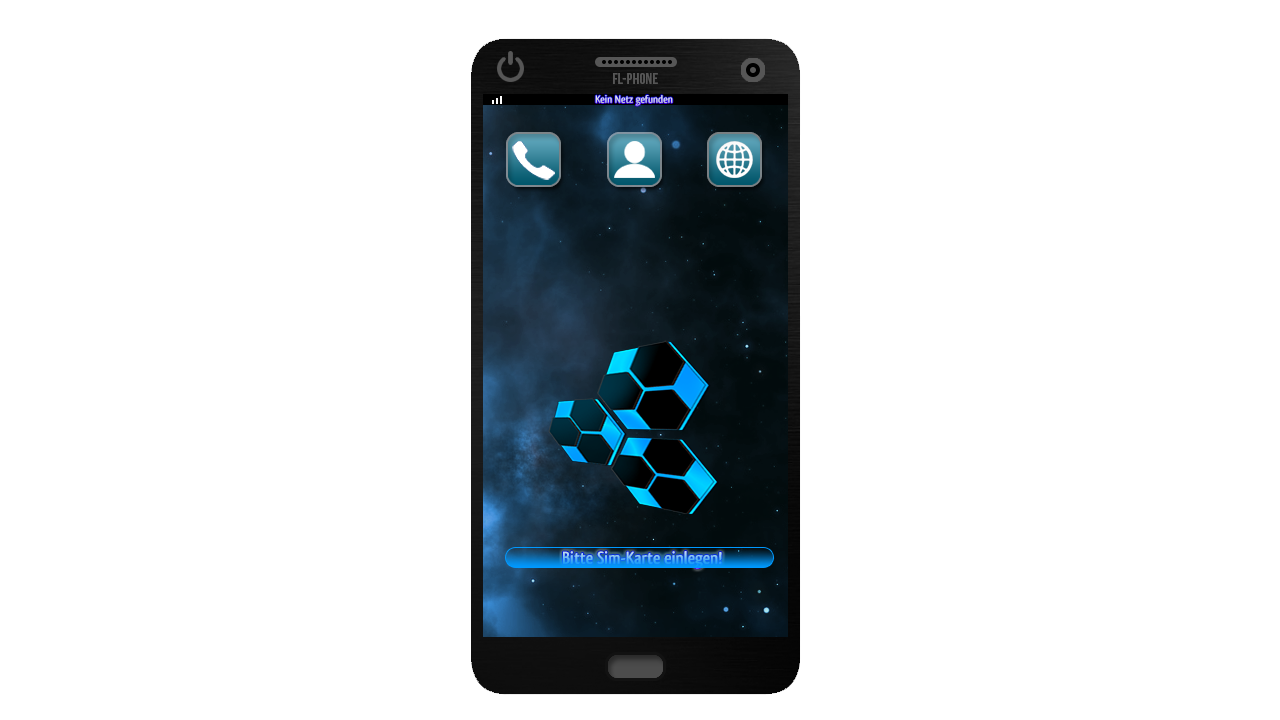
<style>
.page{position:relative;width:1280px;height:720px;background:#ffffff}
.page>*{position:absolute;margin:0}
.t1{font:11px "QlassikBold";color:#d1d4d8}
.t2{font:18px "QlassikBold"}
</style>
<div class="page">
<p class="t1" style="left:595px;top:95px;width:78px;height:11px">Kein Netz gefunden</p>
<p class="t2" style="left:563px;top:551px;width:159px;height:18px">Bitte Sim-Karte einlegen!</p>
</div>
